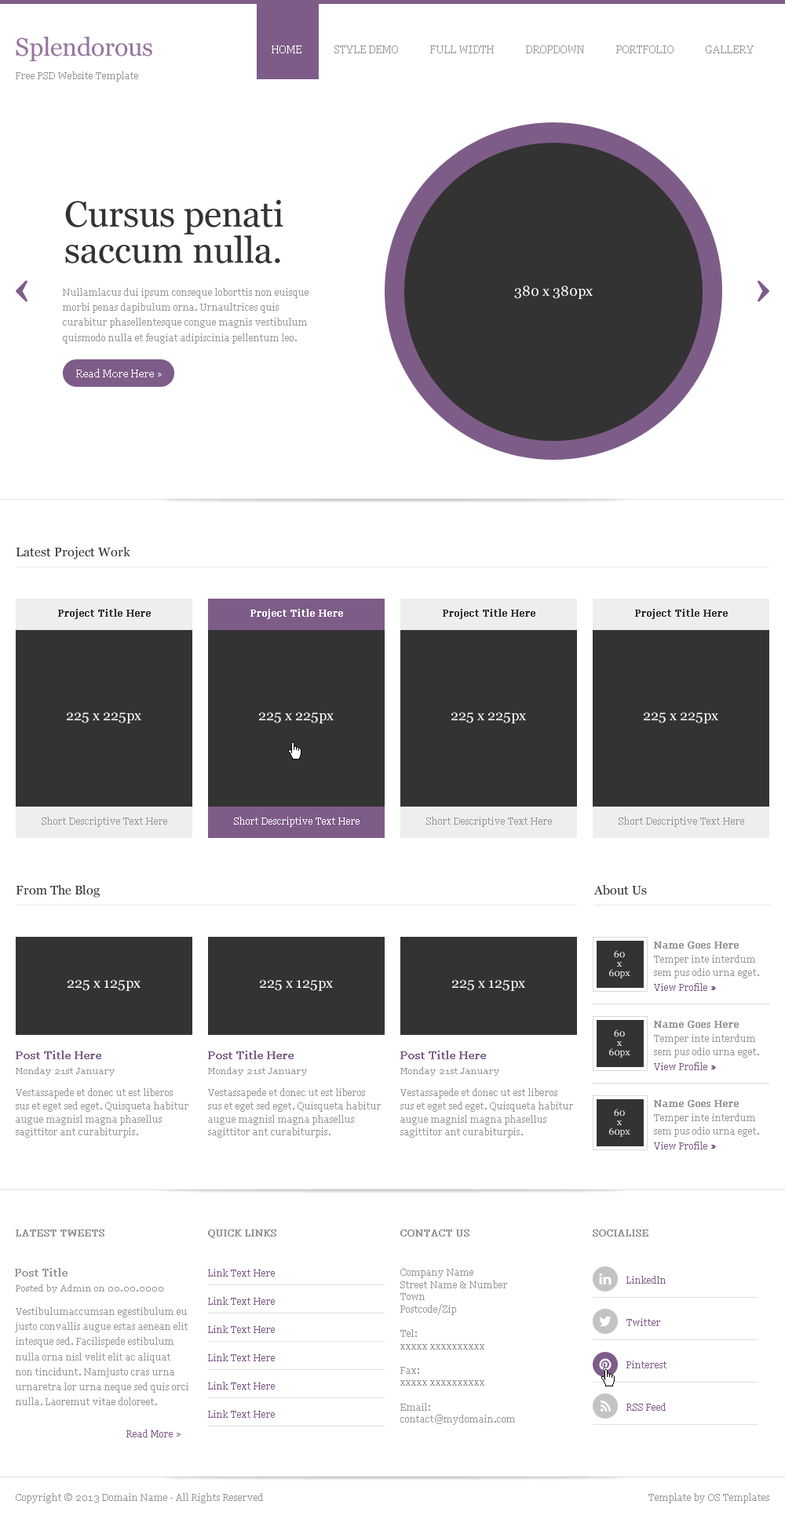
<style>
.page{position:relative;width:785px;height:1519px;background:#ffffff}
.page>*{position:absolute;margin:0}
.t1{font:25.1px "Georgia";color:#96739f}
.t2{font:10.2px "Georgia";color:#ffffff}
.t3{font:10.2px "Georgia";color:#979797}
.t4{font:9.4px "Georgia";color:#979797}
.t5{font:36.1px/36.1px "Georgia";color:#333333}
.t6{font:9.4px/15.1px "Georgia";color:#979797}
.t7{font:14.1px "Georgia";color:#ffffff}
.t8{font:12.6px "Georgia";color:#333333}
.t9{font:9.4px "Georgia";color:#333333;font-weight:bold}
.t10{font:9.4px "Georgia";color:#ffffff;font-weight:bold}
.t11{font:9.4px "Georgia";color:#ffffff}
.t12{font:9.4px "Georgia";color:#979797;font-weight:bold}
.t13{font:9.4px/9.4px "Georgia";color:#ffffff}
.t14{font:9.4px/13.2px "Georgia";color:#979797}
.t15{font:9.4px "Georgia";color:#7e5c88}
.t16{font:9.4px "Georgia";color:#7e5c88;font-weight:bold}
.t17{font:11px "Georgia";color:#7e5c88;font-weight:bold}
.t18{font:8.6px "Georgia";color:#979797}
.t19{font:10.2px "Georgia";color:#979797;font-weight:bold}
.t20{font:9.4px/12.2px "Georgia";color:#979797}
.t21{font:9.4px "Georgia";color:#7e5b87}
</style>
<div class="page">
<p class="t1" style="left:16px;top:36px;width:136px;height:25px">Splendorous</p>
<p class="t2" style="left:272px;top:46px;width:29px;height:7px">HOME</p>
<p class="t3" style="left:334px;top:46px;width:64px;height:7px">STYLE DEMO</p>
<p class="t3" style="left:430px;top:46px;width:64px;height:7px">FULL WIDTH</p>
<p class="t3" style="left:526px;top:46px;width:58px;height:7px">DROPDOWN</p>
<p class="t3" style="left:616px;top:46px;width:57px;height:7px">PORTFOLIO</p>
<p class="t3" style="left:706px;top:46px;width:47px;height:7px">GALLERY</p>
<p class="t4" style="left:16px;top:71px;width:122px;height:11px">Free PSD Website Template</p>
<p class="t5" style="left:65px;top:199px;width:218px;height:65px">Cursus penati <br>saccum nulla.</p>
<p class="t6" style="left:63px;top:288px;width:245px;height:56px">Nullamlacus dui ipsum conseque loborttis non euisque morbi penas dapibulum orna. Urnaultrices quis curabitur phasellentesque congue magnis vestibulum quismodo nulla et feugiat adipiscinia pellentum leo.</p>
<p class="t7" style="left:514px;top:286px;width:79px;height:13px">380 x 380px</p>
<p class="t2" style="left:76px;top:369px;width:86px;height:8px">Read More Here »</p>
<p class="t8" style="left:16px;top:547px;width:114px;height:13px">Latest Project Work</p>
<p class="t9" style="left:58px;top:609px;width:93px;height:10px">Project Title Here</p>
<p class="t10" style="left:250px;top:609px;width:93px;height:10px">Project Title Here</p>
<p class="t9" style="left:443px;top:609px;width:92px;height:10px">Project Title Here</p>
<p class="t9" style="left:635px;top:609px;width:93px;height:10px">Project Title Here</p>
<p class="t7" style="left:67px;top:713px;width:74px;height:11px">225 x 225px</p>
<p class="t7" style="left:259px;top:713px;width:75px;height:11px">225 x 225px</p>
<p class="t7" style="left:451px;top:713px;width:75px;height:11px">225 x 225px</p>
<p class="t7" style="left:644px;top:713px;width:74px;height:11px">225 x 225px</p>
<p class="t4" style="left:42px;top:817px;width:125px;height:10px">Short Descriptive Text Here</p>
<p class="t11" style="left:234px;top:817px;width:125px;height:10px">Short Descriptive Text Here</p>
<p class="t4" style="left:426px;top:817px;width:126px;height:10px">Short Descriptive Text Here</p>
<p class="t4" style="left:618px;top:817px;width:126px;height:10px">Short Descriptive Text Here</p>
<p class="t8" style="left:16px;top:885px;width:84px;height:13px">From The Blog</p>
<p class="t8" style="left:593px;top:885px;width:54px;height:10px">About Us</p>
<p class="t12" style="left:654px;top:942px;width:85px;height:7px">Name Goes Here</p>
<p class="t13" style="left:609px;top:950px;width:21px;height:29px;text-align:center">60<br>x<br>60px</p>
<p class="t14" style="left:654px;top:955px;width:105px;height:24px">Temper inte interdum sem pus odio urna eget.</p>
<p class="t7" style="left:67px;top:980px;width:73px;height:11px">225 x 125px</p>
<p class="t7" style="left:260px;top:980px;width:73px;height:11px">225 x 125px</p>
<p class="t7" style="left:452px;top:980px;width:73px;height:11px">225 x 125px</p>
<p class="t15" style="left:654px;top:983px;width:62px;height:8px">View Profile <span class="t16">»</span></p>
<p class="t12" style="left:654px;top:1021px;width:85px;height:7px">Name Goes Here</p>
<p class="t13" style="left:609px;top:1030px;width:21px;height:28px;text-align:center">60<br>x<br>60px</p>
<p class="t14" style="left:654px;top:1034px;width:105px;height:24px">Temper inte interdum sem pus odio urna eget.</p>
<p class="t17" style="left:16px;top:1051px;width:85px;height:8px">Post Title Here</p>
<p class="t17" style="left:208px;top:1051px;width:86px;height:8px">Post Title Here</p>
<p class="t17" style="left:400px;top:1051px;width:86px;height:8px">Post Title Here</p>
<p class="t18" style="left:16px;top:1067px;width:99px;height:9px">Monday 21st January</p>
<p class="t18" style="left:208px;top:1067px;width:99px;height:9px">Monday 21st January</p>
<p class="t18" style="left:400px;top:1067px;width:99px;height:9px">Monday 21st January</p>
<p class="t15" style="left:654px;top:1063px;width:62px;height:7px">View Profile <span class="t16">»</span></p>
<p class="t14" style="left:16px;top:1089px;width:172px;height:49px">Vestassapede et donec ut est liberos sus et eget sed eget. Quisqueta habitur augue magnisl magna phasellus sagittitor ant curabiturpis.</p>
<p class="t14" style="left:208px;top:1089px;width:173px;height:49px">Vestassapede et donec ut est liberos sus et eget sed eget. Quisqueta habitur augue magnisl magna phasellus sagittitor ant curabiturpis.</p>
<p class="t14" style="left:400px;top:1089px;width:173px;height:49px">Vestassapede et donec ut est liberos sus et eget sed eget. Quisqueta habitur augue magnisl magna phasellus sagittitor ant curabiturpis.</p>
<p class="t13" style="left:609px;top:1109px;width:21px;height:28px;text-align:center">60<br>x<br>60px</p>
<p class="t12" style="left:654px;top:1100px;width:85px;height:7px">Name Goes Here</p>
<p class="t14" style="left:654px;top:1114px;width:105px;height:23px">Temper inte interdum sem pus odio urna eget.</p>
<p class="t15" style="left:654px;top:1142px;width:62px;height:8px">View Profile <span class="t16">»</span></p>
<p class="t12" style="left:16px;top:1230px;width:88px;height:7px">LATEST TWEETS</p>
<p class="t12" style="left:208px;top:1230px;width:68px;height:8px">QUICK LINKS</p>
<p class="t12" style="left:400px;top:1230px;width:69px;height:7px">CONTACT US</p>
<p class="t12" style="left:593px;top:1230px;width:55px;height:7px">SOCIALISE</p>
<p class="t19" style="left:15px;top:1268px;width:52px;height:9px">Post Title</p>
<p class="t15" style="left:208px;top:1269px;width:67px;height:8px">Link Text Here</p>
<p class="t20" style="left:400px;top:1269px;width:115px;height:156px">Company Name<br>Street Name &amp; Number<br>Town<br>Postcode/Zip<br><br>Tel:<br>xxxxx xxxxxxxxxx<br><br>Fax:<br>xxxxx xxxxxxxxxx<br><br>Email:<br>contact@mydomain.com</p>
<p class="t21" style="left:626px;top:1276px;width:40px;height:8px">LinkedIn</p>
<p class="t18" style="left:16px;top:1285px;width:147px;height:8px">Posted by Admin on 00.00.0000</p>
<p class="t15" style="left:208px;top:1297px;width:67px;height:8px">Link Text Here</p>
<p class="t6" style="left:15px;top:1307px;width:173px;height:99px">Vestibulumaccumsan egestibulum eu justo convallis augue estas aenean elit intesque sed. Facilispede estibulum nulla orna nisl velit elit ac aliquat non tincidunt. Namjusto cras urna urnaretra lor urna neque sed quis orci nulla. Laoremut vitae doloreet.</p>
<p class="t15" style="left:208px;top:1326px;width:67px;height:7px">Link Text Here</p>
<p class="t15" style="left:626px;top:1318px;width:34px;height:8px">Twitter</p>
<p class="t15" style="left:208px;top:1354px;width:67px;height:8px">Link Text Here</p>
<p class="t21" style="left:626px;top:1361px;width:40px;height:8px">Pinterest</p>
<p class="t15" style="left:208px;top:1382px;width:67px;height:8px">Link Text Here</p>
<p class="t15" style="left:626px;top:1403px;width:40px;height:8px">RSS Feed</p>
<p class="t15" style="left:208px;top:1410px;width:67px;height:8px">Link Text Here</p>
<p class="t21" style="left:126px;top:1430px;width:55px;height:8px">Read More »</p>
<p class="t4" style="left:16px;top:1493px;width:247px;height:11px">Copyright © 2013 Domain Name - All Rights Reserved</p>
<p class="t4" style="left:648px;top:1493px;width:121px;height:11px">Template by OS Templates</p>
</div>
